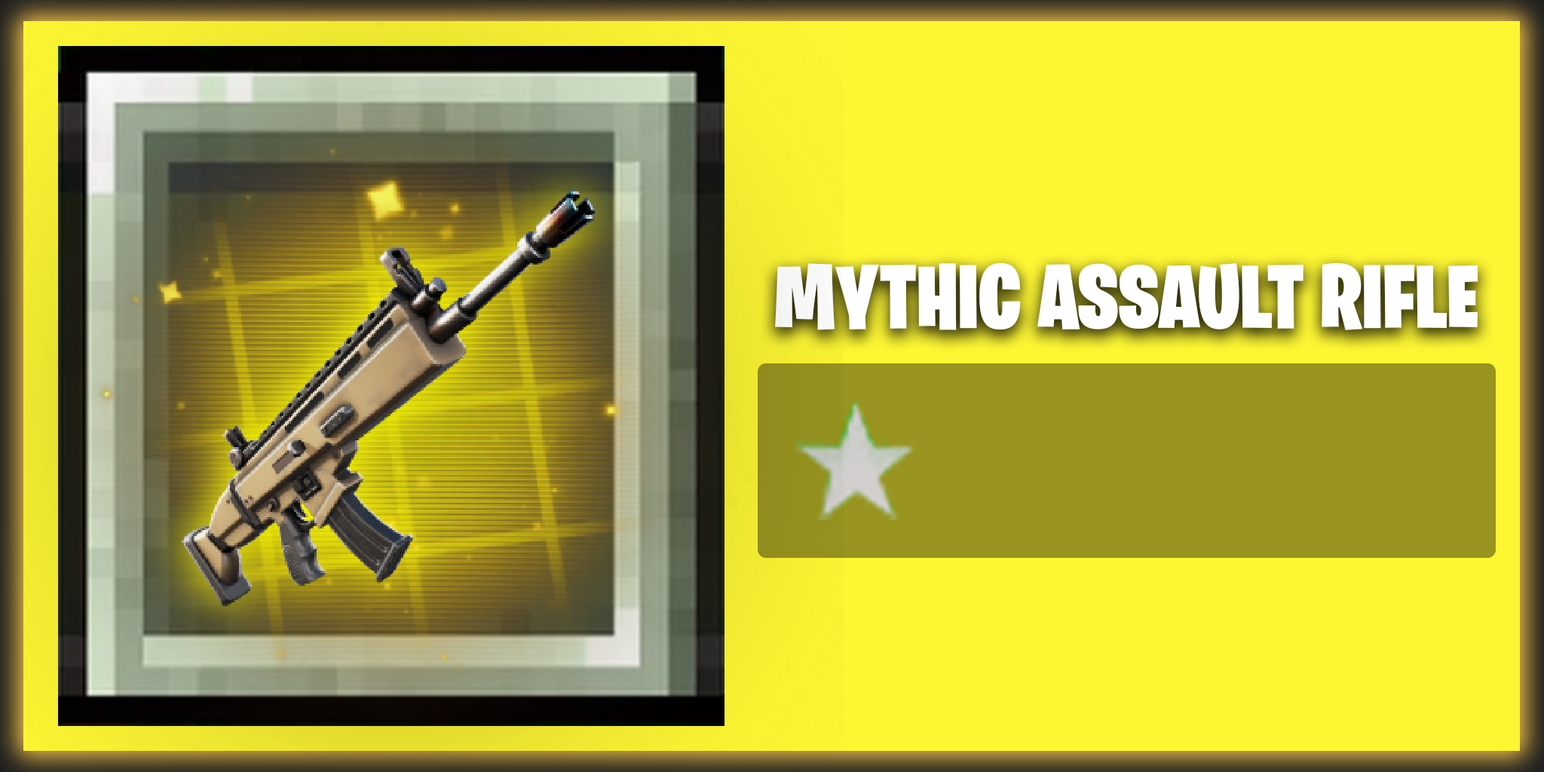
<style>
.page{position:relative;width:1544px;height:772px;background:#fdf633}
.page>*{position:absolute;margin:0}
.t1{font:90.5px "BurbankBigCondensed-Black";color:#ffffff}
</style>
<div class="page">
<p class="t1" style="left:775px;top:262px;width:704px;height:68px">MYTHIC ASSAULT RIFLE</p>
</div>
